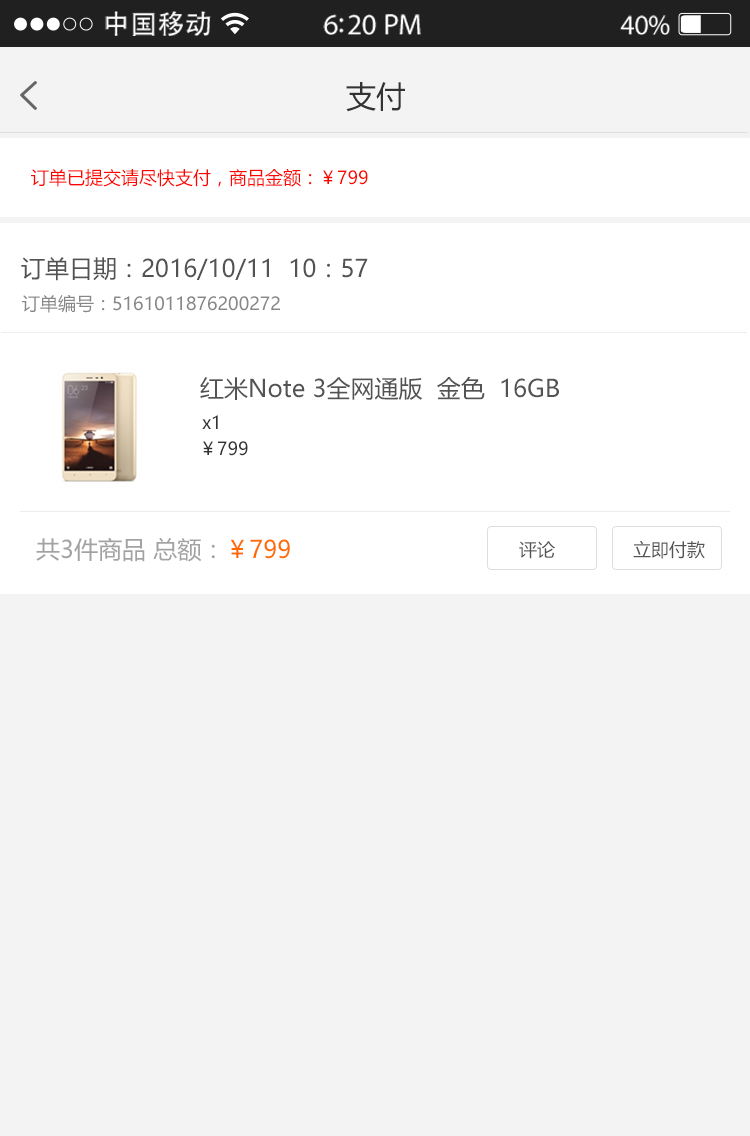
<style>
.page{position:relative;width:750px;height:1136px;background:#f3f3f3}
.page>*{position:absolute;margin:0}
.t1{font:27px "AdobeHeitiStd-Regular";letter-spacing:0.02em;color:#ffffff}
.t2{font:29.4px "MyriadPro-Regular";letter-spacing:-0.02em;color:#ffffff}
.t3{font:28.2px "MyriadPro-Regular";letter-spacing:-0.02em;color:#ffffff}
.t4{font:30px "MicrosoftYaHei";color:#333333}
.t5{font:18px "MicrosoftYaHei";color:#fb0600}
.t6{font:24px "MicrosoftYaHei";color:#535353}
.t7{font:18px "MicrosoftYaHei";color:#878787}
.t8{font:18px "MicrosoftYaHei";color:#333333}
.t9{font:24px "MicrosoftYaHei";color:#a2a2a2}
.t10{font:24px "MicrosoftYaHei";color:#ff6b00}
.t11{font:18px "MicrosoftYaHei";color:#535353}
</style>
<div class="page">
<p class="t1" style="left:105px;top:11px;width:106px;height:25px">中国移动</p>
<p class="t2" style="left:323px;top:14px;width:98px;height:21px">6:20 PM</p>
<p class="t3" style="left:620px;top:15px;width:50px;height:20px">40%</p>
<p class="t4" style="left:346px;top:82px;width:59px;height:30px">支付</p>
<p class="t5" style="left:31px;top:168px;width:337px;height:19px">订单已提交请尽快支付，商品金额：￥799</p>
<p class="t6" style="left:21px;top:257px;width:347px;height:24px">订单日期：2016/10/11  10：57</p>
<p class="t7" style="left:22px;top:294px;width:258px;height:19px">订单编号：5161011876200272</p>
<p class="t6" style="left:200px;top:376px;width:359px;height:24px">红米Note 3全网通版  金色  16GB</p>
<p class="t8" style="left:202px;top:415px;width:16px;height:14px">x1</p>
<p class="t8" style="left:203px;top:441px;width:45px;height:15px">￥799</p>
<p class="t9" style="left:36px;top:537px;width:254px;height:25px">共3件商品 总额：<span class="t10">￥799</span></p>
<p class="t11" style="left:519px;top:541px;width:36px;height:18px">评论</p>
<p class="t11" style="left:633px;top:540px;width:72px;height:19px">立即付款</p>
</div>
